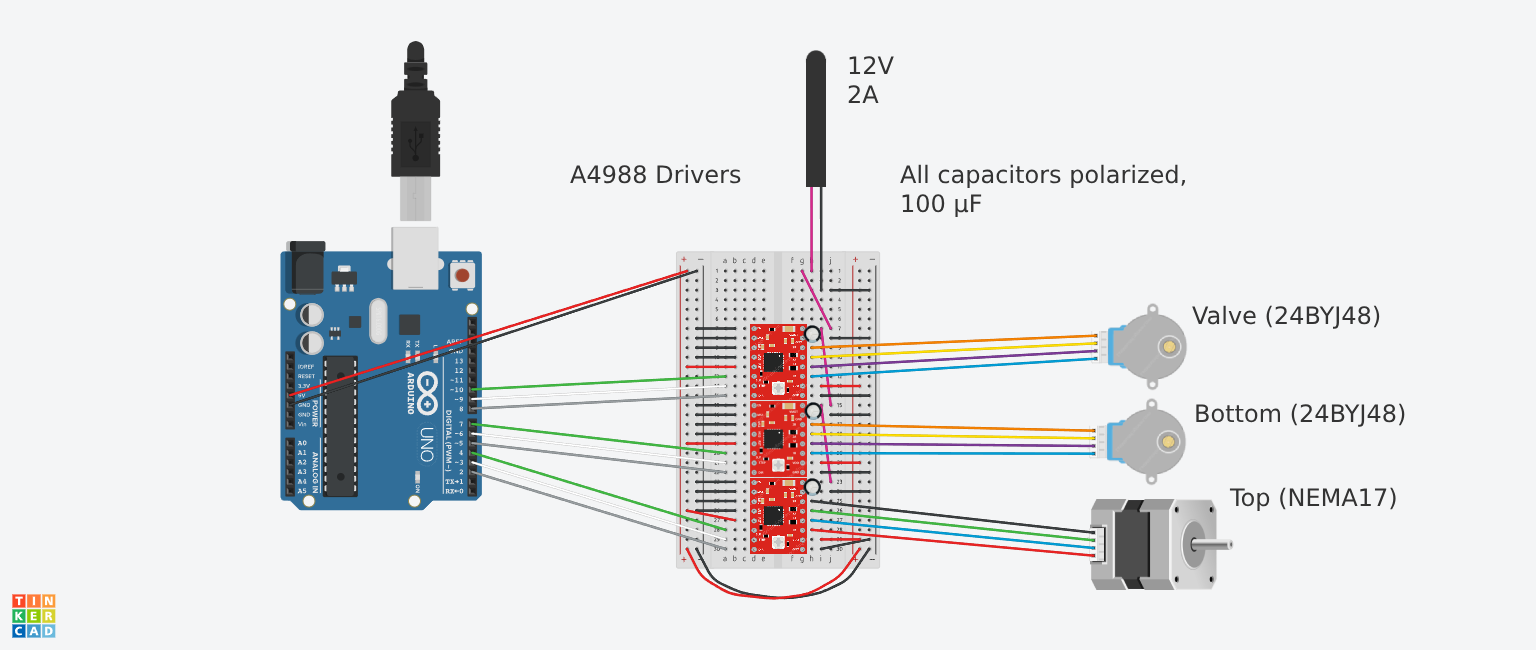
<style>
.page{position:relative;width:1536px;height:650px;background:#f4f5f6}
.page>*{position:absolute;margin:0}
.t1{font:24px "DejaVuSans";color:#333333}
.t2{font:24px "DejaVuSans";color:#ec2222}
</style>
<div class="page">
<p class="t1" style="left:848px;top:56px;width:46px;height:47px">12V<br>2A</p>
<p class="t1" style="left:570px;top:164px;width:171px;height:20px">A4988 Drivers</p>
<p class="t1" style="left:900px;top:164px;width:285px;height:53px"><span class="t2">A</span>ll capacitors polarized,<br>100 µF</p>
<p class="t1" style="left:1192px;top:305px;width:188px;height:24px">Valve (24BYJ48)</p>
<p class="t1" style="left:1196px;top:403px;width:209px;height:24px">Bottom (24BYJ48)</p>
<p class="t1" style="left:1229px;top:487px;width:167px;height:24px">Top (NEMA17)</p>
</div>
